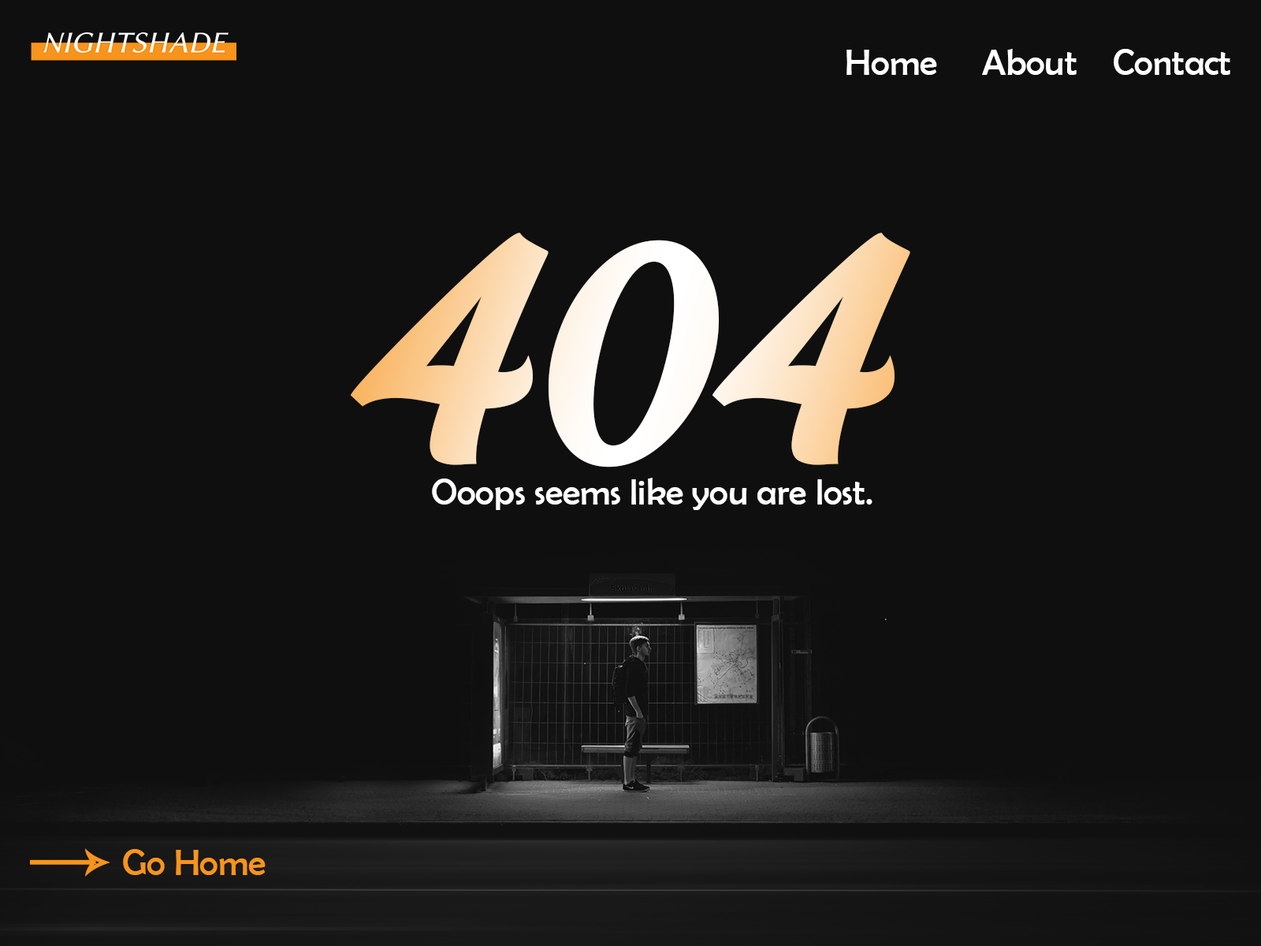
<style>
.page{position:relative;width:1261px;height:946px;background:#0f0f0f}
.page>*{position:absolute;margin:0}
.t1{font:36.1px "BerlinSansFB-Reg";color:#ffffff}
.t2{font:295.5px "RushingNightshadeDEMO"}
.t3{font:36.2px "BerlinSansFB-Reg";color:#ffffff}
.t4{font:36.1px "BerlinSansFB-Reg";color:#f7941d}
</style>
<div class="page">
<p class="t1" style="left:846px;top:49px;width:384px;height:26px">Home     About    Contact</p>
<p class="t2" style="left:351px;top:232px;width:559px;height:235px">404</p>
<p class="t3" style="left:432px;top:478px;width:440px;height:32px">Ooops seems like you are lost.</p>
<p class="t4" style="left:123px;top:849px;width:143px;height:26px">Go Home</p>
</div>
